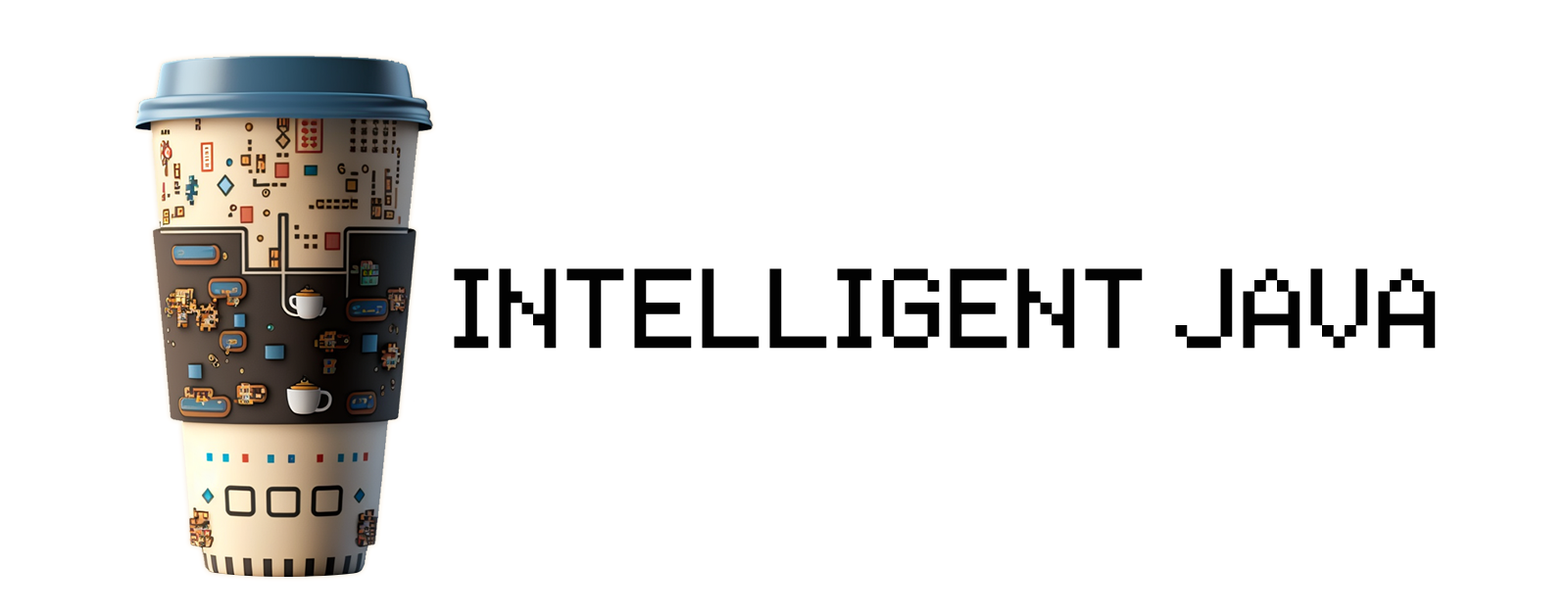
<style>
.page{position:relative;width:1568px;height:615px;background:#ffffff}
.page>*{position:absolute;margin:0}
.t1{font:90.2px "Space-Invaders";color:#020202}
</style>
<div class="page">
<p class="t1" style="left:454px;top:269px;width:982px;height:80px">Intelligent Java</p>
</div>
